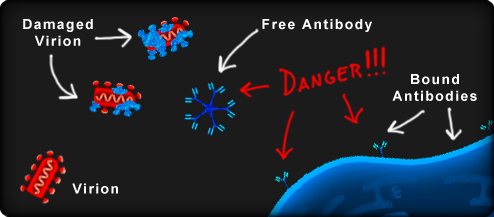
<style>
.page{position:relative;width:494px;height:217px;background:#1b1b1b}
.page>*{position:absolute;margin:0}
.t1{font:14px "Arial-BoldMT";letter-spacing:0.1em;color:#ffffff}
</style>
<div class="page">
<p class="t1" style="left:23px;top:19px;width:70px;height:27px;text-align:center">Damaged<br>Virion</p>
<p class="t1" style="left:262px;top:19px;width:110px;height:13px">Free Antibody</p>
<p class="t1" style="left:392px;top:74px;width:85px;height:27px;text-align:center">Bound<br>Antibodies</p>
<p class="t1" style="left:72px;top:183px;width:46px;height:11px">Virion</p>
</div>
